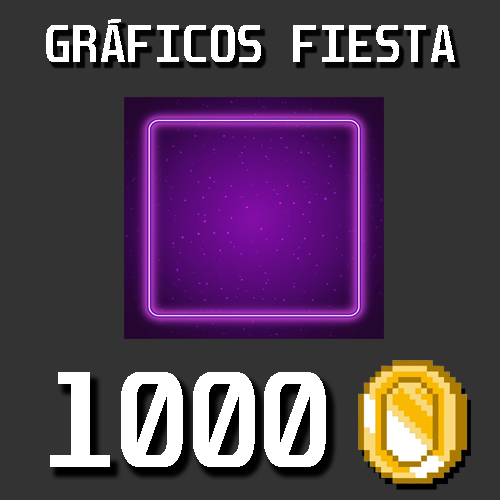
<style>
.page{position:relative;width:500px;height:500px;background:#333333}
.page>*{position:absolute;margin:0}
.t1{font:45px "Unispace-Bold";color:#ffffff}
.t2{font:117.4px "Unispace-Bold";color:#ffffff}
</style>
<div class="page">
<p class="t1" style="left:46px;top:19px;width:409px;height:43px">GRÁFICOS FIESTA</p>
<p class="t2" style="left:50px;top:372px;width:276px;height:95px">1000</p>
</div>
